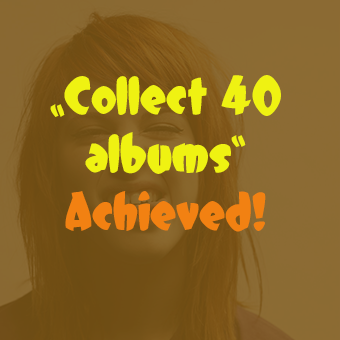
<style>
.page{position:relative;width:340px;height:340px}
.page>*{position:absolute;margin:0}
.t1{font:48px "DCC-Dreamer";color:#eff212}
.t2{font:48px "DCC-Dreamer";color:#f28112}
</style>
<div class="page">
<p class="t1" style="left:50px;top:75px;width:231px;height:157px;text-align:center">„Collect 40 albums”<br><span class="t2">Achieved!</span></p>
</div>
